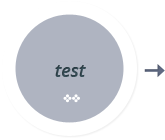
<style>
.page{position:relative;width:165px;height:140px;background:#ffffff}
.page>*{position:absolute;margin:0}
.t1{font:18px "OpenSans-SemiboldItalic";color:#334851}
</style>
<div class="page">
<p class="t1" style="left:55px;top:65px;width:31px;height:12px">test</p>
</div>
